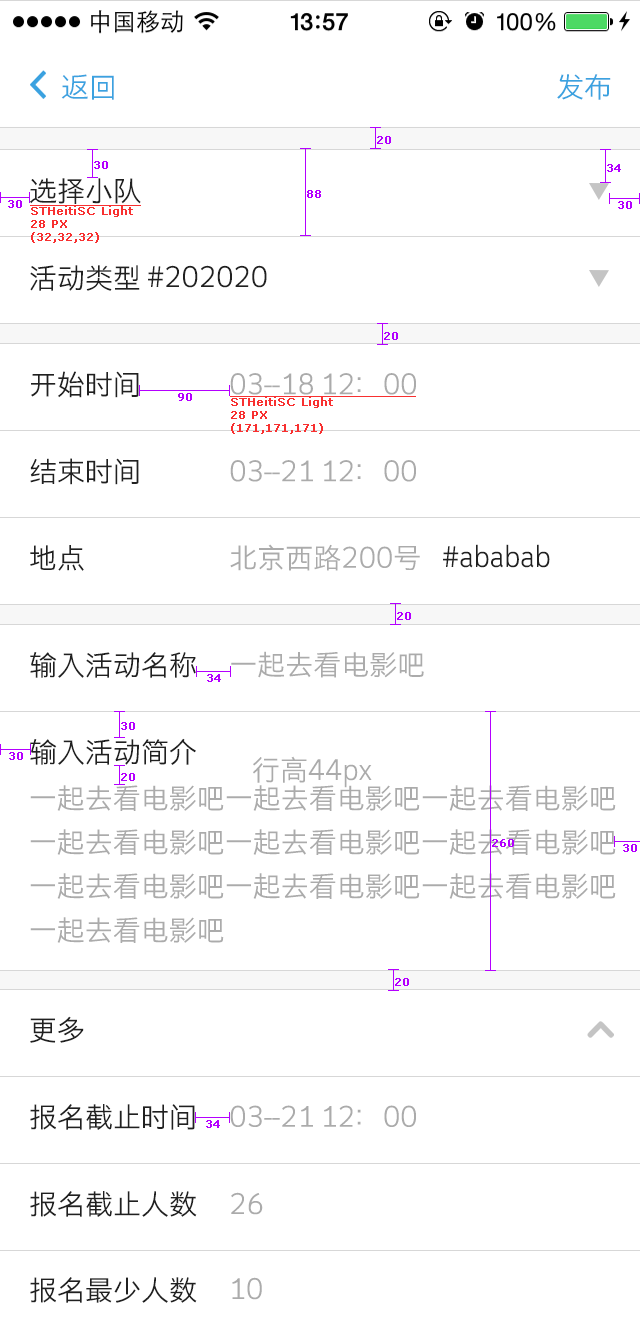
<style>
.page{position:relative;width:640px;height:1334px;background:#ffffff}
.page>*{position:absolute;margin:0}
.t1{font:28px "STHeitiSC-Light";color:#3ba2e0}
.t2{font:11px "Verdana";color:#b400ff;font-weight:bold}
.t3{font:28px "STHeitiSC-Light";color:#202020}
.t4{font:11px "Verdana";color:#f83030;font-weight:bold}
.t5{font:28px "STHeitiSC-Light";color:#ababab}
.t6{font:28px/44px "STHeitiSC-Light";color:#ababab}
</style>
<div class="page">
<p class="t1" style="left:61px;top:74px;width:53px;height:26px">返回</p>
<p class="t1" style="left:557px;top:74px;width:54px;height:26px">发布</p>
<p class="t2" style="left:377px;top:136px;width:14px;height:8px">20</p>
<p class="t2" style="left:94px;top:161px;width:14px;height:8px">30</p>
<p class="t2" style="left:607px;top:164px;width:14px;height:8px">34</p>
<p class="t3" style="left:30px;top:178px;width:111px;height:26px">选择小队</p>
<p class="t2" style="left:307px;top:190px;width:14px;height:8px">88</p>
<p class="t2" style="left:8px;top:200px;width:14px;height:8px">30</p>
<p class="t4" style="left:31px;top:206px;width:102px;height:37px">STHeitiSC Light<br>28 PX<br>(32,32,32)</p>
<p class="t2" style="left:618px;top:201px;width:14px;height:8px">30</p>
<p class="t3" style="left:30px;top:265px;width:110px;height:26px">活动类型</p>
<p class="t3" style="left:148px;top:265px;width:119px;height:23px">#202020</p>
<p class="t2" style="left:384px;top:332px;width:14px;height:8px">20</p>
<p class="t3" style="left:31px;top:371px;width:108px;height:27px">开始时间</p>
<p class="t5" style="left:230px;top:373px;width:186px;height:22px">03--18 12：00</p>
<p class="t2" style="left:178px;top:393px;width:14px;height:8px">90</p>
<p class="t4" style="left:231px;top:397px;width:102px;height:37px">STHeitiSC Light<br>28 PX<br>(171,171,171)</p>
<p class="t3" style="left:30px;top:458px;width:109px;height:27px">结束时间</p>
<p class="t5" style="left:230px;top:460px;width:186px;height:22px">03--21 12：00</p>
<p class="t3" style="left:30px;top:545px;width:54px;height:26px">地点</p>
<p class="t5" style="left:230px;top:544px;width:190px;height:27px">北京西路200号</p>
<p class="t3" style="left:443px;top:544px;width:107px;height:24px">#ababab</p>
<p class="t2" style="left:397px;top:612px;width:14px;height:8px">20</p>
<p class="t3" style="left:30px;top:652px;width:166px;height:26px">输入活动名称</p>
<p class="t5" style="left:231px;top:651px;width:193px;height:27px">一起去看电影吧</p>
<p class="t2" style="left:207px;top:674px;width:14px;height:8px">34</p>
<p class="t2" style="left:121px;top:722px;width:14px;height:8px">30</p>
<p class="t3" style="left:30px;top:738px;width:166px;height:27px">输入活动简介</p>
<p class="t2" style="left:9px;top:752px;width:14px;height:8px">30</p>
<p class="t5" style="left:253px;top:756px;width:119px;height:32px">行高44px</p>
<p class="t2" style="left:121px;top:773px;width:14px;height:8px">20</p>
<p class="t6" style="left:30px;top:785px;width:586px;height:158px">一起去看电影吧一起去看电影吧一起去看电影吧<br>一起去看电影吧一起去看电影吧一起去看电影吧<br>一起去看电影吧一起去看电影吧一起去看电影吧<br>一起去看电影吧</p>
<p class="t2" style="left:492px;top:839px;width:22px;height:8px">260</p>
<p class="t2" style="left:623px;top:844px;width:14px;height:8px">30</p>
<p class="t2" style="left:395px;top:978px;width:14px;height:8px">20</p>
<p class="t3" style="left:30px;top:1016px;width:54px;height:27px">更多</p>
<p class="t3" style="left:30px;top:1104px;width:165px;height:26px">报名截止时间</p>
<p class="t5" style="left:230px;top:1105px;width:186px;height:22px">03--21 12：00</p>
<p class="t2" style="left:206px;top:1120px;width:14px;height:8px">34</p>
<p class="t3" style="left:30px;top:1191px;width:167px;height:26px">报名截止人数</p>
<p class="t5" style="left:231px;top:1192px;width:32px;height:23px">26</p>
<p class="t3" style="left:30px;top:1277px;width:167px;height:26px">报名最少人数</p>
<p class="t5" style="left:232px;top:1277px;width:30px;height:23px">10</p>
</div>
